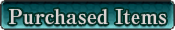
<style>
.page{position:relative;width:175px;height:30px}
.page>*{position:absolute;margin:0}
.t1{font:20px "RyuminPro-ExBold";color:#d9d4d2}
</style>
<div class="page">
<p class="t1" style="left:9px;top:9px;width:157px;height:16px">Purchased Items</p>
</div>
